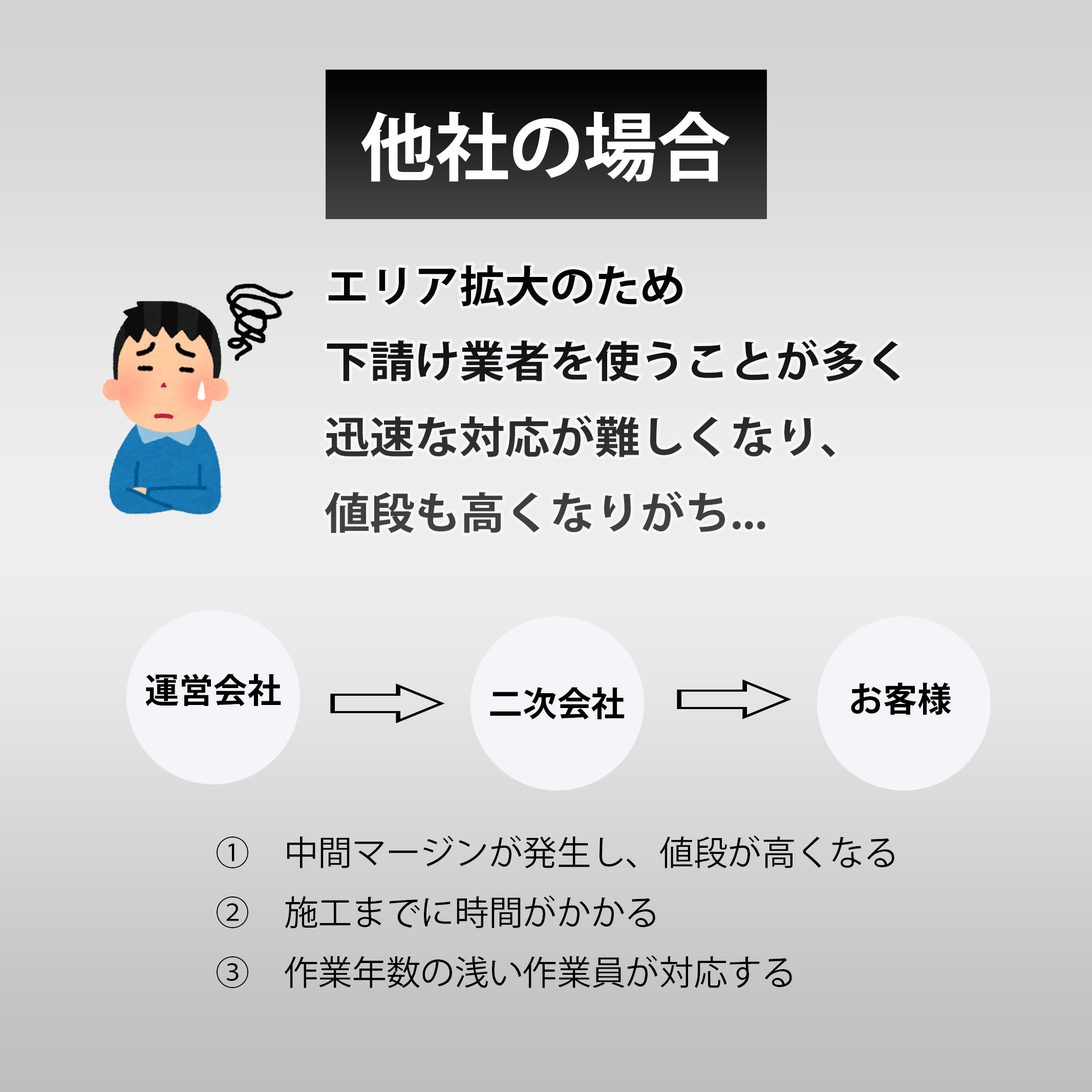
<style>
.page{position:relative;width:1092px;height:1092px}
.page>*{position:absolute;margin:0}
.t1{font:74.1px "KozGoPr6N-Bold";color:#ffffff}
.t2{font:43.2px "KozGoPr6N-Bold";scale:1.04 1}
.t3{font:34.1px "KozGoPr6N-Bold";color:#000000}
.t4{font:57.9px "KozGoPr6N-Regular";color:#000000;scale:2.16 1}
.t5{font:34.1px "KozGoPr6N-Regular";color:#000000}
</style>
<div class="page">
<p class="t1" style="left:361px;top:111px;width:369px;height:71px">他社の場合</p>
<p class="t2" style="left:325px;top:265px;width:575px;height:268px">エリア拡大のため<br>下請け業者を使うことが多く<br>迅速な対応が難しくなり、<br>値段も高くなりがち...</p>
<p class="t3" style="left:145px;top:674px;width:136px;height:32px">運営会社</p>
<p class="t4" style="left:330px;top:683px;width:115px;height:40px">⇨</p>
<p class="t3" style="left:490px;top:687px;width:135px;height:33px">二次会社</p>
<p class="t4" style="left:677px;top:679px;width:114px;height:40px">⇨</p>
<p class="t3" style="left:851px;top:682px;width:100px;height:33px">お客様</p>
<p class="t5" style="left:217px;top:835px;width:677px;height:153px">①　中間マージンが発生し、値段が高くなる<br>②　施工までに時間がかかる<br>③　作業年数の浅い作業員が対応する</p>
</div>
